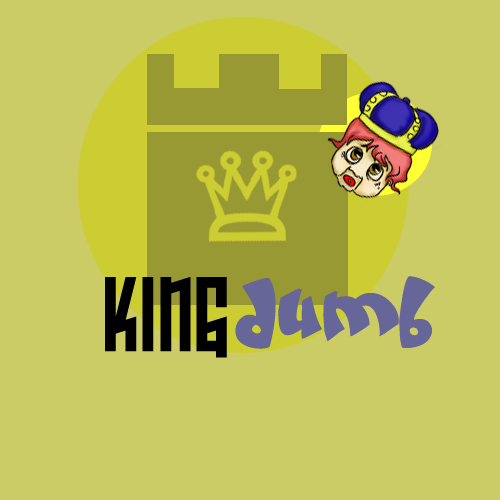
<style>
.page{position:relative;width:500px;height:500px;background:#cccc66}
.page>*{position:absolute;margin:0}
.t1{font:102px "ArmorPiercing20BB";color:#000000}
.t2{font:82px "Creamandsugar";color:#666699}
</style>
<div class="page">
<p class="t1" style="left:105px;top:277px;width:122px;height:81px">KING</p>
<p class="t2" style="left:235px;top:276px;width:200px;height:73px">dumb</p>
</div>
